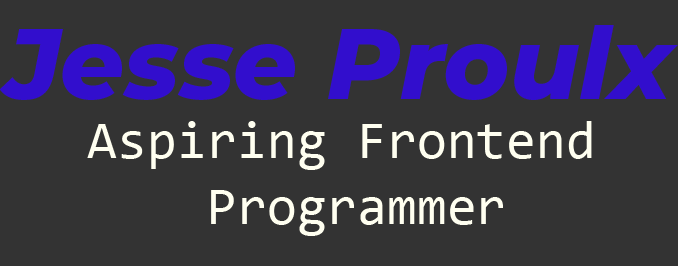
<style>
.page{position:relative;width:678px;height:266px;background:#333333}
.page>*{position:absolute;margin:0}
.t1{font:100px "Montserrat-ExtraBoldItalic";color:#320ecd}
.t2{font:54.4px "Consolas";color:#fffff0}
</style>
<div class="page">
<p class="t1" style="left:0px;top:25px;width:678px;height:75px">Jesse Proulx</p>
<p class="t2" style="left:87px;top:121px;width:505px;height:115px;text-align:center">Aspiring Frontend <br>Programmer</p>
</div>
